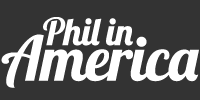
<style>
.page{position:relative;width:200px;height:100px;background:#333333}
.page>*{position:absolute;margin:0}
.t1{font:37.5px "Lobster1.4";letter-spacing:-0.015em;color:#ffffff}
.t2{font:61.4px "Lobster1.4";letter-spacing:-0.015em;color:#ffffff}
</style>
<div class="page">
<p class="t1" style="left:43px;top:17px;width:90px;height:29px">Phil in</p>
<p class="t2" style="left:1px;top:34px;width:198px;height:54px">America</p>
</div>
